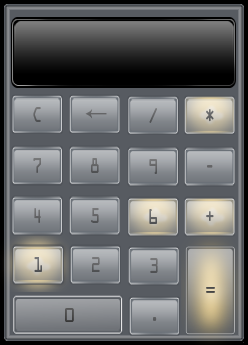
<style>
.page{position:relative;width:248px;height:345px}
.page>*{position:absolute;margin:0}
.t1{font:19.6px "OCRAStd";color:#626365;scale:0.74 1}
.t2{font:19.6px "OCRAStd";color:#666668;scale:0.74 1}
.t3{font:19.6px "OCRAStd";color:#747576;scale:0.74 1}
.t4{font:19.6px "OCRAStd";color:#636465;scale:0.74 1}
.t5{font:19.6px "OCRAStd";color:#6a6a6c;scale:0.74 1}
.t6{font:19.6px "OCRAStd";color:#646466;scale:0.74 1}
.t7{font:19.6px "OCRAStd";color:#616163;scale:0.74 1}
.t8{font:19.6px "OCRAStd";color:#5e5f60;scale:0.74 1}
.t9{font:19.6px "OCRAStd";color:#656667;scale:0.74 1}
.t10{font:19.6px "OCRAStd";color:#5a5b5d;scale:0.74 1}
.t11{font:19.6px "OCRAStd";color:#646566;scale:0.74 1}
.t12{font:18px "OCRAStd";color:#474747}
.t13{font:18px "OCRAStd";color:#484848}
.t14{font:19.6px "OCRAStd";color:#5b5c5e;scale:0.74 1}
</style>
<div class="page">
<p class="t1" style="left:33px;top:107px;width:8px;height:15px">C</p>
<p class="t1" style="left:149px;top:108px;width:8px;height:15px">/</p>
<p class="t2" style="left:206px;top:109px;width:8px;height:13px">*</p>
<p class="t3" style="left:33px;top:158px;width:8px;height:15px">7</p>
<p class="t4" style="left:91px;top:158px;width:8px;height:15px">8</p>
<p class="t5" style="left:149px;top:159px;width:8px;height:15px">9</p>
<p class="t6" style="left:207px;top:165px;width:6px;height:3px">-</p>
<p class="t7" style="left:34px;top:208px;width:7px;height:15px">4</p>
<p class="t6" style="left:91px;top:208px;width:8px;height:15px">5</p>
<p class="t8" style="left:149px;top:209px;width:8px;height:15px">6</p>
<p class="t9" style="left:206px;top:211px;width:8px;height:10px">+</p>
<p class="t10" style="left:34px;top:257px;width:8px;height:15px">1</p>
<p class="t11" style="left:92px;top:257px;width:8px;height:15px">2</p>
<p class="t11" style="left:150px;top:258px;width:8px;height:15px">3</p>
<p class="t12" style="left:206px;top:287px;width:9px;height:6px">=</p>
<p class="t13" style="left:65px;top:308px;width:9px;height:14px">0</p>
<p class="t14" style="left:153px;top:317px;width:4px;height:4px">.</p>
</div>
